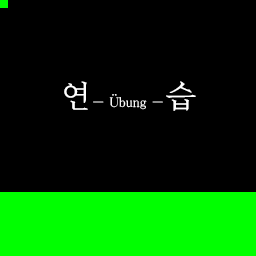
<style>
.page{position:relative;width:256px;height:256px;background:#000000}
.page>*{position:absolute;margin:0}
.t1{font:32px "KoreanMW-L";letter-spacing:1em;color:#ffffff}
</style>
<div class="page">
<p class="t1" style="left:64px;top:81px;width:132px;height:30px">연 습</p>
</div>
